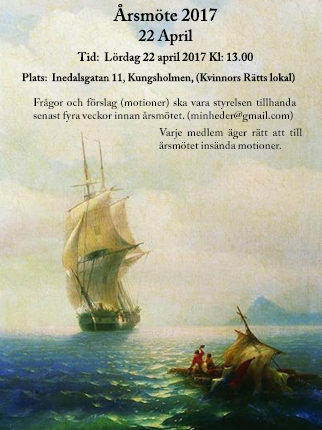
<style>
.page{position:relative;width:322px;height:430px}
.page>*{position:absolute;margin:0}
.t1{font:12px/10px "ACaslonPro-Semibold";color:#020202}
.t2{font:18px/10px "ACaslonPro-Semibold";color:#020202}
.t3{font:16px/10px "ACaslonPro-Semibold";color:#020202}
.t4{font:11px "ACaslonPro-Semibold";color:#020202}
.t5{font:12px "ACaslonPro-Semibold";color:#020202}
</style>
<div class="page">
<p class="t1" style="left:77px;top:4px;width:176px;height:61px;text-align:center"><span class="t2">Årsmöte 2017 <br></span><span class="t3"><br>22 April<br><br></span>Tid:  Lördag 22 april 2017 Kl: 13.00</p>
<p class="t4" style="left:22px;top:72px;width:273px;height:13px"><span class="t5"><br> <br></span>Plats:  Inedalsgatan 11, Kungsholmen, (Kvinnors Rätts lokal)</p>
<p class="t4" style="left:33px;top:97px;width:264px;height:25px;text-align:justify">Frågor och förslag (motioner) ska vara styrelsen tillhanda senast fyra veckor innan årsmötet. (minheder@gmail.com)</p>
<p class="t4" style="left:159px;top:128px;width:143px;height:21px;text-align:justify">Varje medlem äger rätt att till årsmötet insända motioner.</p>
</div>
